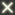
<style>
.page{position:relative;width:15px;height:15px}
.page>*{position:absolute;margin:0}
.t1{font:21.6px "FZSTK--GBK1-0";color:#ffffff}
</style>
<div class="page">
<p class="t1" style="left:2px;top:2px;width:11px;height:11px">×</p>
</div>
